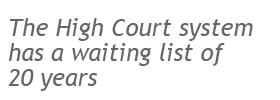
<style>
.page{position:relative;width:280px;height:100px;background:#ffffff}
.page>*{position:absolute;margin:0}
.t1{font:24px/25px "TrebuchetMS-Italic";color:#666666}
</style>
<div class="page">
<p class="t1" style="left:8px;top:18px;width:245px;height:73px">The High Court system <br>has a waiting list of  <br>20 years</p>
</div>
